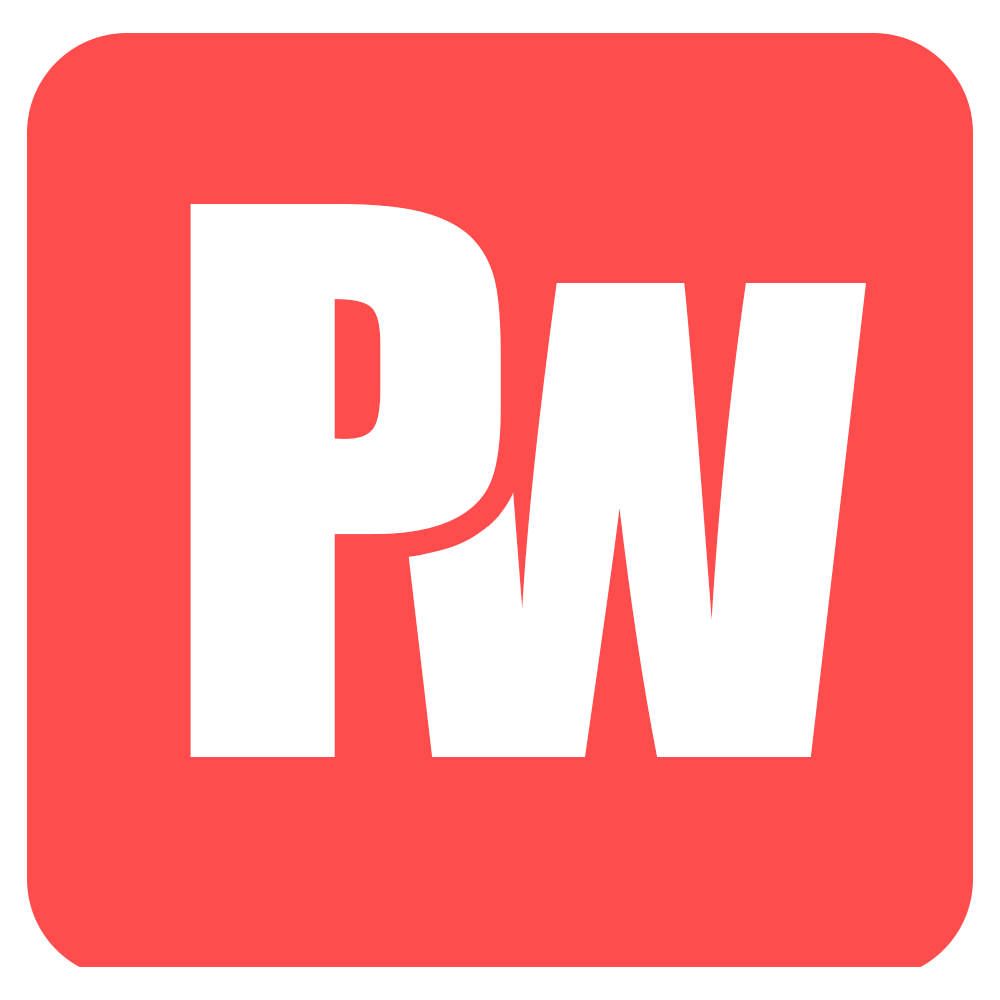
<style>
.page{position:relative;width:1000px;height:1000px;background:#ff4c4c}
.page>*{position:absolute;margin:0}
.t1{font:700px "Impact";letter-spacing:0.005em;color:#ffffff}
.t2{font:600px "Impact";letter-spacing:0.005em;color:#ffffff}
</style>
<div class="page">
<p class="t1" style="left:190px;top:204px;width:311px;height:553px">P</p>
<p class="t2" style="left:376px;top:283px;width:490px;height:474px">W</p>
</div>
